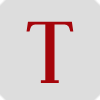
<style>
.page{position:relative;width:100px;height:100px;background:#dddddd}
.page>*{position:absolute;margin:0}
.t1{font:86px "DustismoRoman";color:#a5050b}
</style>
<div class="page">
<p class="t1" style="left:26px;top:21px;width:48px;height:62px">T</p>
</div>
